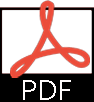
<style>
.page{position:relative;width:94px;height:102px;background:#ffffff}
.page>*{position:absolute;margin:0}
.t1{font:30px "Corbel";color:#fffcfc}
</style>
<div class="page">
<p class="t1" style="left:23px;top:80px;width:48px;height:20px">PDF</p>
</div>
